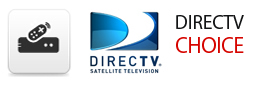
<style>
.page{position:relative;width:279px;height:85px;background:#ffffff}
.page>*{position:absolute;margin:0}
.t1{font:18px "KozGoPr6N-Regular";color:#131415}
.t2{font:20px "KozGoPr6N-Regular";color:#d60500}
</style>
<div class="page">
<p class="t1" style="left:176px;top:15px;width:68px;height:38px">DIRECTV<br><span class="t2">CHOICE</span></p>
</div>
